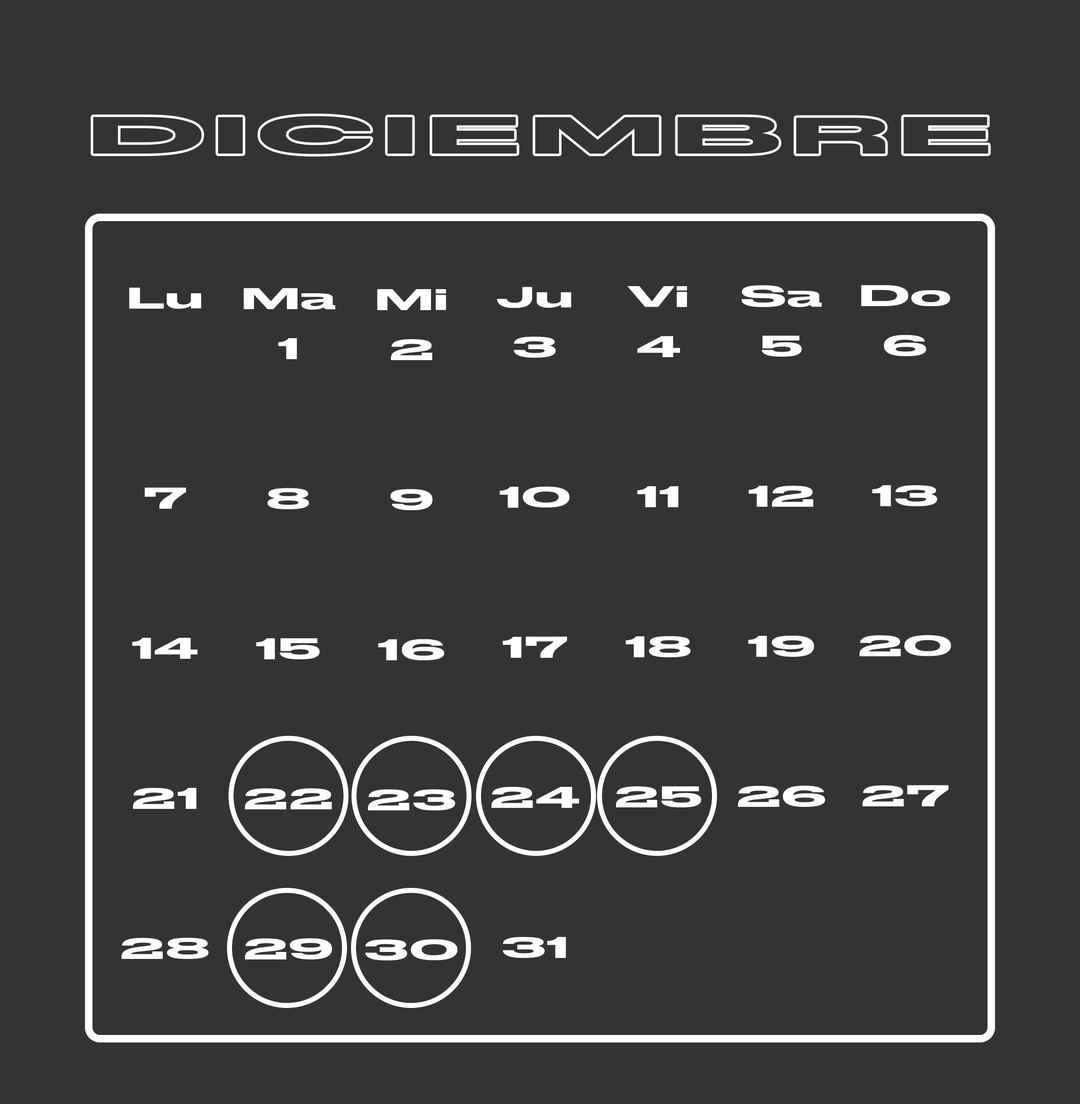
<style>
.page{position:relative;width:1080px;height:1104px;background:#333333}
.page>*{position:absolute;margin:0}
.t1{font:51.8px "StretchProRegular";letter-spacing:0.075em;color:#333333;scale:2 1}
.t2{font:30px/50px "StretchProRegular";color:#ffffff;scale:1.5 1}
</style>
<div class="page">
<p class="t1" style="left:93px;top:116px;width:896px;height:38px">DICIEMBRE</p>
<p class="t2" style="left:122px;top:288px;width:87px;height:671px;text-align:justify">Lu<br><br><br><br>7<br><br><br>14<br><br><br>21<br><br><br>28</p>
<p class="t2" style="left:244px;top:288px;width:92px;height:671px;text-align:justify">Ma<br>1<br><br><br>8<br><br><br>15<br><br><br>22<br><br><br>29</p>
<p class="t2" style="left:365px;top:289px;width:93px;height:671px;text-align:justify">Mi<br>2<br><br><br>9<br><br><br>16<br><br><br>23<br><br><br>30</p>
<p class="t2" style="left:492px;top:287px;width:87px;height:671px;text-align:justify">Ju<br>3<br><br><br>10<br><br><br>17<br><br><br>24<br><br><br>31</p>
<p class="t2" style="left:616px;top:286px;width:86px;height:521px;text-align:justify">Vi<br>4<br><br><br>11<br><br><br>18<br><br><br>25</p>
<p class="t2" style="left:738px;top:285px;width:88px;height:522px;text-align:justify">Sa<br>5<br><br><br>12<br><br><br>19<br><br><br>26</p>
<p class="t2" style="left:860px;top:285px;width:91px;height:521px;text-align:justify">Do<br>6<br><br><br>13<br><br><br>20<br><br><br>27</p>
</div>
